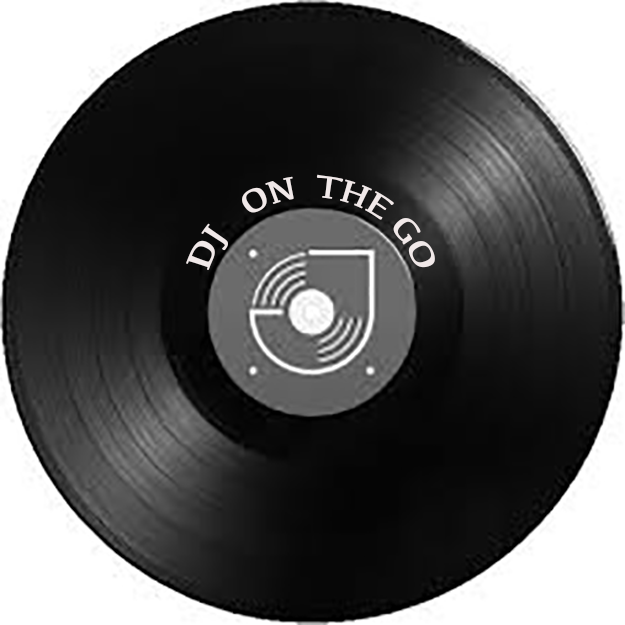
<style>
.page{position:relative;width:625px;height:625px}
.page>*{position:absolute;margin:0}
.t1{font:27.8px "Kefa-Regular";color:#f1e9e9}
</style>
<div class="page">
<p class="t1" style="left:186px;top:174px;width:249px;height:96px">DJ   ON  THE GO</p>
</div>
